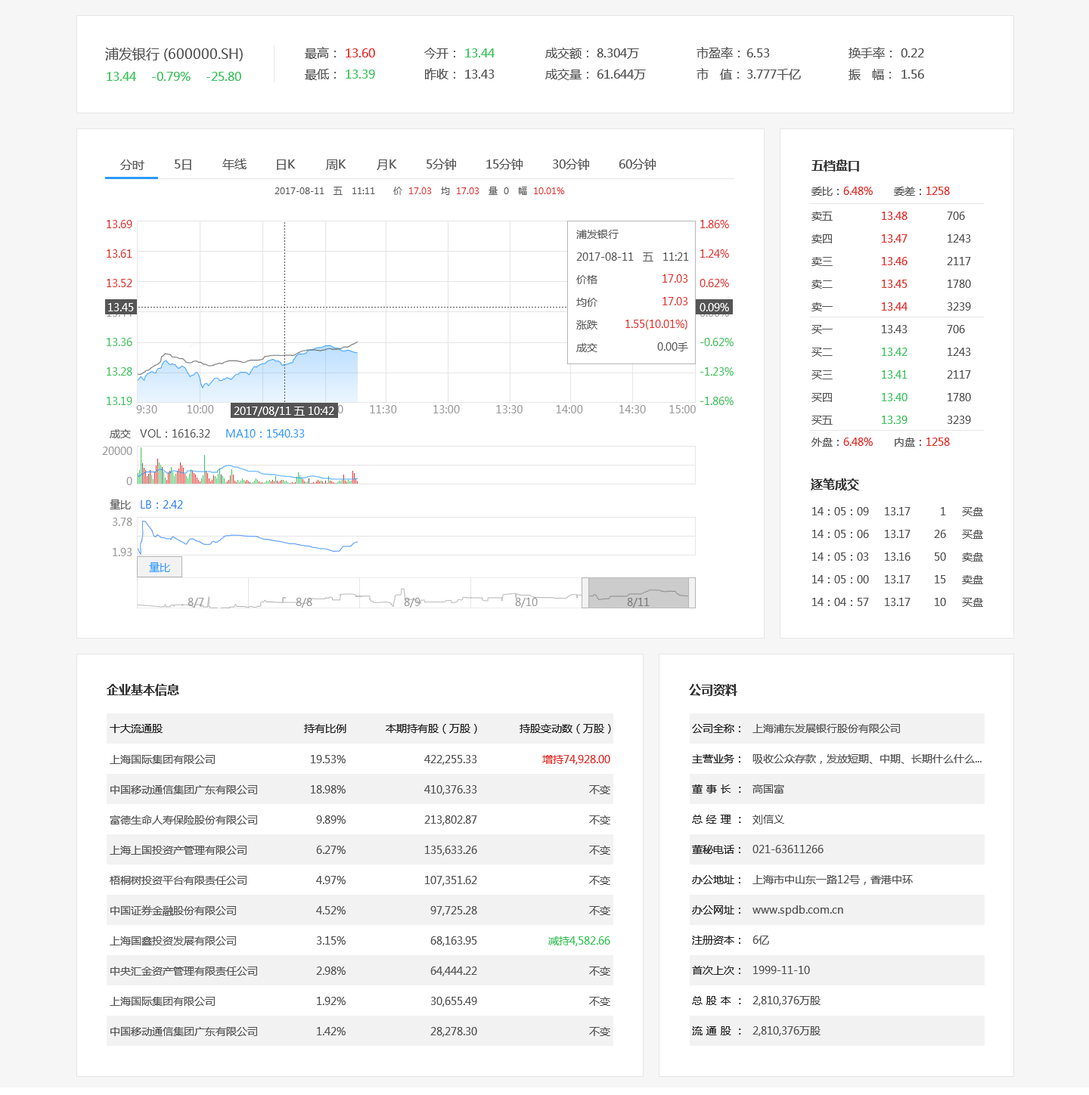
<style>
.page{position:relative;width:1089px;height:1095px;background:#ffffff}
.page>*{position:absolute;margin:0}
.t1{font:13.6px "MicrosoftYaHei";color:#555555}
.t2{font:12.1px/21.2px "MicrosoftYaHei";color:#555555}
.t3{font:12.1px/21.2px "MicrosoftYaHei";color:#e22f2a}
.t4{font:12.1px/21.2px "MicrosoftYaHei";color:#3bc25b}
.t5{font:12.1px "MicrosoftYaHei";color:#3bc25b}
.t6{font:12.1px "MicrosoftYaHei";color:#555555}
.t7{font:12.1px "MicrosoftYaHei-Bold";color:#333333}
.t8{font:9.1px "MicrosoftYaHei";color:#555555}
.t9{font:9.1px "MicrosoftYaHei";color:#e22f2a}
.t10{font:10.6px "MicrosoftYaHei";color:#e22f2a}
.t11{font:10.6px "MicrosoftYaHei";color:#555555}
.t12{font:10.6px/29.5px "MicrosoftYaHei";color:#e22f2a}
.t13{font:10.6px/29.5px "MicrosoftYaHei";color:#999999}
.t14{font:10.6px/29.5px "MicrosoftYaHei";color:#3bc25b}
.t15{font:10.6px/22.7px "MicrosoftYaHei";color:#555555}
.t16{font:10.6px/22.7px "MicrosoftYaHei";color:#e22f2a}
.t17{font:10.6px "MicrosoftYaHei";color:#ffffff}
.t18{font:10.6px/22.7px "MicrosoftYaHei";color:#3bc25b}
.t19{font:10.6px "MicrosoftYaHei";letter-spacing:0.02em;color:#999999}
.t20{font:10.6px "MicrosoftYaHei";color:#2b99ff}
.t21{font:10.6px/30.2px "MicrosoftYaHei";color:#999999}
.t22{font:10.6px "MicrosoftYaHei";color:#2c81ff}
.t23{font:10.6px "MicrosoftYaHei";color:#999999}
.t24{font:10.6px "MicrosoftYaHei";color:#7a7a7a}
.t25{font:10.6px "MicrosoftYaHei";color:#222222}
.t26{font:10.6px/30.2px "MicrosoftYaHei";color:#222222}
.t27{font:10.6px/30.2px "MicrosoftYaHei";letter-spacing:0.34em;color:#222222}
.t28{font:10.6px/30.2px "MicrosoftYaHei";color:#555555}
.t29{font:10.6px/30.2px "MicrosoftYaHei";color:#e22f2a}
.t30{font:10.6px/30.2px "MicrosoftYaHei";color:#3bc25b}
</style>
<div class="page">
<p class="t1" style="left:105px;top:48px;width:138px;height:13px">浦发银行 (600000.SH)</p>
<p class="t2" style="left:305px;top:47px;width:31px;height:33px">最高：<br>最低：</p>
<p class="t3" style="left:345px;top:48px;width:30px;height:31px">13.60<br><span class="t4">13.39</span></p>
<p class="t2" style="left:424px;top:48px;width:31px;height:32px">今开：<br>昨收：</p>
<p class="t4" style="left:465px;top:48px;width:29px;height:31px">13.44<br><span class="t2">13.43</span></p>
<p class="t2" style="left:545px;top:48px;width:43px;height:32px">成交额：<br>成交量：</p>
<p class="t2" style="left:596px;top:48px;width:50px;height:32px">8.304万<br>61.644万</p>
<p class="t2" style="left:696px;top:47px;width:43px;height:33px">市盈率：<br>市   值：</p>
<p class="t2" style="left:747px;top:48px;width:54px;height:32px">6.53<br>3.777千亿</p>
<p class="t2" style="left:848px;top:47px;width:43px;height:33px">换手率：<br>振   幅：</p>
<p class="t2" style="left:900px;top:48px;width:24px;height:31px">0.22<br>1.56</p>
<p class="t5" style="left:107px;top:72px;width:134px;height:9px">13.44    -0.79%    -25.80</p>
<p class="t6" style="left:120px;top:160px;width:24px;height:10px">分时</p>
<p class="t6" style="left:175px;top:160px;width:16px;height:10px">5日</p>
<p class="t6" style="left:222px;top:159px;width:24px;height:11px">年线</p>
<p class="t6" style="left:277px;top:160px;width:19px;height:10px">日K</p>
<p class="t6" style="left:326px;top:160px;width:20px;height:10px">周K</p>
<p class="t6" style="left:376px;top:160px;width:21px;height:10px">月K</p>
<p class="t6" style="left:426px;top:159px;width:30px;height:11px">5分钟</p>
<p class="t6" style="left:486px;top:159px;width:36px;height:11px">15分钟</p>
<p class="t6" style="left:553px;top:159px;width:36px;height:11px">30分钟</p>
<p class="t6" style="left:619px;top:159px;width:36px;height:11px">60分钟</p>
<p class="t7" style="left:811px;top:160px;width:48px;height:12px">五档盘口</p>
<p class="t8" style="left:274px;top:187px;width:291px;height:8px">2017-08-11   五   11:11      价  <span class="t9">17.03</span>   均  <span class="t9">17.03</span>   量  0   幅  <span class="t9">10.01%</span></p>
<p class="t10" style="left:811px;top:187px;width:138px;height:9px"><span class="t11">委比：</span>6.48%       <span class="t11">委差：</span>1258</p>
<p class="t12" style="left:107px;top:220px;width:25px;height:185px">13.69<br>13.61<br>13.52<br><span class="t13">13.44<br></span><span class="t14">13.36<br>13.28<br>13.19</span></p>
<p class="t14" style="left:699px;top:220px;width:34px;height:185px"><span class="t12">1.86%<br>1.24%<br>0.62%<br></span><span class="t13">0.00%<br></span>-0.62%<br>-1.23%<br>-1.86%</p>
<p class="t15" style="left:811px;top:212px;width:21px;height:99px">卖五<br>卖四<br>卖三<br>卖二<br>卖一</p>
<p class="t16" style="left:881px;top:212px;width:26px;height:99px">13.48<br>13.47<br>13.46<br>13.45<br>13.44</p>
<p class="t15" style="left:946px;top:212px;width:25px;height:99px">706<br>1243<br>2117<br>1780<br>3239</p>
<p class="t15" style="left:576px;top:230px;width:113px;height:122px">浦发银行<br>2017-08-11   五   11:21<br>价格<br>均价<br>涨跌<br>成交</p>
<p class="t16" style="left:625px;top:274px;width:63px;height:78px;text-align:right">17.03<br>17.03<br>1.55(10.01%)<br><span class="t15">0.00手</span></p>
<p class="t17" style="left:108px;top:303px;width:26px;height:8px">13.45</p>
<p class="t17" style="left:699px;top:303px;width:30px;height:8px">0.09%</p>
<p class="t15" style="left:811px;top:325px;width:21px;height:100px">买一<br>买二<br>买三<br>买四<br>买五</p>
<p class="t18" style="left:881px;top:325px;width:26px;height:99px"><span class="t15">13.43<br></span>13.42<br>13.41<br>13.40<br>13.39</p>
<p class="t15" style="left:946px;top:325px;width:25px;height:99px">706<br>1243<br>2117<br>1780<br>3239</p>
<p class="t19" style="left:136px;top:405px;width:559px;height:9px">9:30         10:00            10:30           11:00        11:30           13:00           13:30          14:00           14:30       15:00</p>
<p class="t17" style="left:234px;top:407px;width:100px;height:10px">2017/08/11 五 10:42</p>
<p class="t11" style="left:110px;top:429px;width:195px;height:9px">成交   VOL：1616.32     <span class="t20">MA10：1540.33</span></p>
<p class="t10" style="left:811px;top:438px;width:138px;height:9px"><span class="t11">外盘：</span>6.48%       <span class="t11">内盘：</span>1258</p>
<p class="t21" style="left:102px;top:447px;width:30px;height:38px;text-align:right">20000<br>0</p>
<p class="t7" style="left:810px;top:479px;width:49px;height:12px">逐笔成交</p>
<p class="t22" style="left:110px;top:500px;width:73px;height:10px"><span class="t11">量比   </span>LB：2.42</p>
<p class="t15" style="left:812px;top:507px;width:57px;height:99px">14：05：09<br>14：05：06<br>14：05：03<br>14：05：00<br>14：04：57</p>
<p class="t15" style="left:884px;top:507px;width:26px;height:99px;text-align:right">13.17<br>13.17<br>13.16<br>13.17<br>13.17</p>
<p class="t15" style="left:934px;top:507px;width:12px;height:99px;text-align:right">1<br>26<br>50<br>15<br>10</p>
<p class="t15" style="left:962px;top:507px;width:21px;height:100px">买盘<br>买盘<br>卖盘<br>卖盘<br>买盘</p>
<p class="t21" style="left:113px;top:518px;width:19px;height:38px;text-align:right">3.78<br>1.93</p>
<p class="t20" style="left:149px;top:562px;width:21px;height:10px"><span class="t11">    </span>量比</p>
<p class="t23" style="left:187px;top:598px;width:17px;height:10px">8/7</p>
<p class="t23" style="left:296px;top:598px;width:16px;height:10px">8/8</p>
<p class="t23" style="left:404px;top:598px;width:16px;height:10px">8/9</p>
<p class="t23" style="left:515px;top:598px;width:22px;height:10px">8/10</p>
<p class="t24" style="left:627px;top:598px;width:22px;height:10px">8/11</p>
<p class="t7" style="left:107px;top:684px;width:72px;height:12px">企业基本信息</p>
<p class="t7" style="left:689px;top:684px;width:48px;height:12px">公司资料</p>
<p class="t25" style="left:110px;top:724px;width:53px;height:9px">十大流通股</p>
<p class="t25" style="left:304px;top:724px;width:42px;height:9px">持有比例</p>
<p class="t25" style="left:386px;top:724px;width:91px;height:10px">本期持有股（万股）</p>
<p class="t25" style="left:519px;top:724px;width:92px;height:10px">持股变动数（万股）</p>
<p class="t26" style="left:692px;top:724px;width:49px;height:312px">公司全称：<br>主营业务：<br><span class="t27">董事长</span>：<br><span class="t27">总经理</span>：<br>董秘电话：<br>办公地址：<br>办公网址：<br>注册资本：<br>首次上次：<br><span class="t27">总股本</span>：<br><span class="t27">流通股</span>：</p>
<p class="t28" style="left:752px;top:724px;width:229px;height:312px">上海浦东发展银行股份有限公司<br>吸收公众存款，发放短期、中期、长期什么什么...<br>高国富<br>刘信义<br>021-63611266<br>上海市中山东一路12号，香港中环<br>www.spdb.com.cn<br>6亿<br>1999-11-10<br>2,810,376万股<br>2,810,376万股</p>
<p class="t28" style="left:110px;top:755px;width:147px;height:281px">上海国际集团有限公司<br>中国移动通信集团广东有限公司<br>富德生命人寿保险股份有限公司<br>上海上国投资产管理有限公司<br>梧桐树投资平台有限责任公司<br>中国证券金融股份有限公司<br>上海国鑫投资发展有限公司<br>中央汇金资产管理有限责任公司<br>上海国际集团有限公司<br>中国移动通信集团广东有限公司</p>
<p class="t28" style="left:311px;top:755px;width:34px;height:281px;text-align:right">19.53%<br>18.98%<br>9.89%<br>6.27%<br>4.97%<br>4.52%<br>3.15%<br>2.98%<br>1.92%<br>1.42%</p>
<p class="t28" style="left:424px;top:755px;width:53px;height:282px;text-align:right">422,255.33<br>410,376.33<br>213,802.87<br>135,633.26<br>107,351.62<br>97,725.28<br>68,163.95<br>64,444.22<br>30,655.49<br>28,278.30</p>
<p class="t28" style="left:542px;top:755px;width:68px;height:281px;text-align:right"><span class="t29">增持74,928.00<br></span>不变<br>不变<br>不变<br>不变<br>不变<br><span class="t30">减持4,582.66<br></span>不变<br>不变<br>不变</p>
</div>
